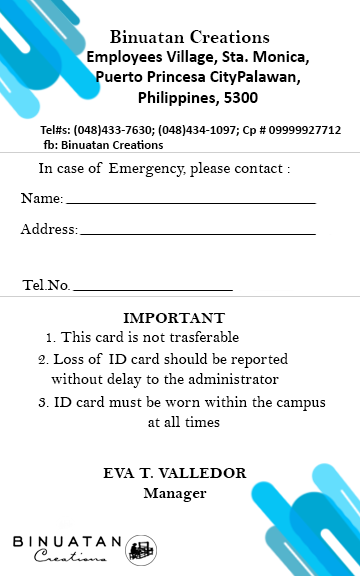
<style>
.page{position:relative;width:360px;height:576px;background:#ffffff}
.page>*{position:absolute;margin:0}
.t1{font:19.3px "BellMTBold";color:#000000}
.t2{font:17px "Calibri-Bold";color:#000000}
.t3{font:13px "Calibri-Bold";color:#000000}
.t4{font:16.3px "BellMT";color:#000000}
.t5{font:16.3px "BellMTBold";color:#000000}
</style>
<div class="page">
<p class="t1" style="left:110px;top:30px;width:160px;height:13px">Binuatan Creations</p>
<p class="t2" style="left:87px;top:50px;width:222px;height:56px;text-align:center">Employees Village, Sta. Monica,<br> Puerto Princesa CityPalawan, <br>Philippines, 5300</p>
<p class="t3" style="left:40px;top:125px;width:301px;height:11px">Tel#s: (048)433-7630; (048)434-1097; Cp # 09999927712</p>
<p class="t3" style="left:43px;top:140px;width:120px;height:9px">fb: Binuatan Creations</p>
<p class="t4" style="left:39px;top:162px;width:251px;height:15px">In case of Emergency, please contact :</p>
<p class="t4" style="left:21px;top:193px;width:42px;height:10px">Name:</p>
<p class="t4" style="left:20px;top:223px;width:58px;height:11px">Address:</p>
<p class="t4" style="left:22px;top:279px;width:48px;height:11px">Tel.No.</p>
<p class="t5" style="left:123px;top:313px;width:103px;height:10px">IMPORTANT</p>
<p class="t4" style="left:46px;top:331px;width:193px;height:11px">1. This card is not trasferable</p>
<p class="t4" style="left:38px;top:353px;width:250px;height:35px;text-align:center">2. Loss of ID card should be reported <br>without delay to the administrator</p>
<p class="t4" style="left:38px;top:396px;width:288px;height:31px;text-align:center">3. ID card must be worn within the campus <br>at all times</p>
<p class="t5" style="left:103px;top:468px;width:144px;height:10px">EVA T. VALLEDOR</p>
<p class="t5" style="left:143px;top:488px;width:64px;height:14px">Manager</p>
</div>
